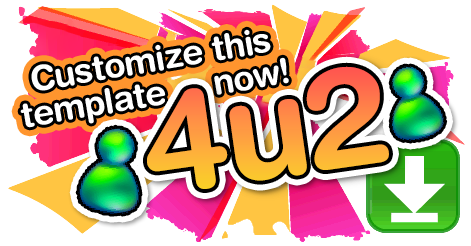
<style>
.page{position:relative;width:471px;height:246px;background:#ffffff}
.page>*{position:absolute;margin:0}
.t1{font:34.8px "HelveticaRounded-Bold";letter-spacing:-0.025em;color:#ffffff}
.t2{font:140px "HelveticaRounded-Bold";letter-spacing:-0.025em}
</style>
<div class="page">
<p class="t1" style="left:31px;top:29px;width:240px;height:62px;rotate:-10deg">Customize this</p>
<p class="t1" style="left:20px;top:57px;width:269px;height:71px;rotate:-10deg">template     now!</p>
<p class="t2" style="left:147px;top:66px;width:242px;height:123px;rotate:-8deg">4u2</p>
</div>
